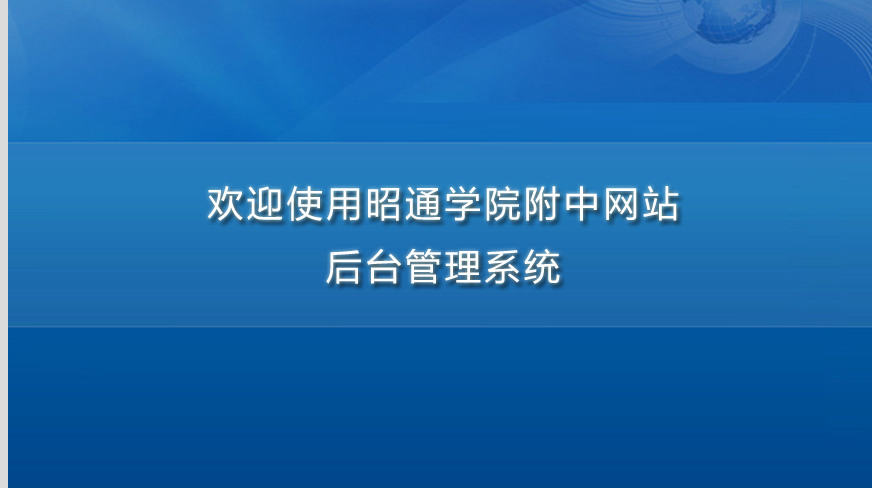
<style>
.page{position:relative;width:873px;height:488px}
.page>*{position:absolute;margin:0}
.t1{font:36px "MicrosoftYaHei";letter-spacing:0.1em;color:#ffffff}
</style>
<div class="page">
<p class="t1" style="left:207px;top:185px;width:472px;height:99px;text-align:center">欢迎使用昭通学院附中网站<br>后台管理系统</p>
</div>
